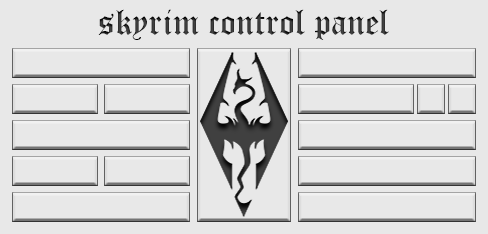
<style>
.page{position:relative;width:488px;height:234px;background:#e8e8e8}
.page>*{position:absolute;margin:0}
.t1{font:36px "OldEnglishTextMT";color:#373737}
</style>
<div class="page">
<p class="t1" style="left:98px;top:9px;width:291px;height:31px">skyrim control panel</p>
</div>
